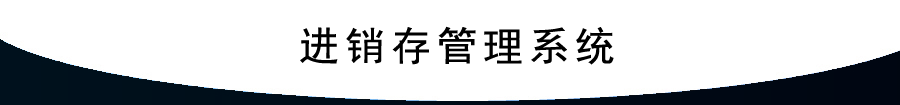
<style>
.page{position:relative;width:900px;height:105px;background:#ffffff}
.page>*{position:absolute;margin:0}
.t1{font:40px "SimHei";letter-spacing:0.15em;color:#000000}
</style>
<div class="page">
<p class="t1" style="left:300px;top:26px;width:314px;height:39px">进销存管理系统</p>
</div>
